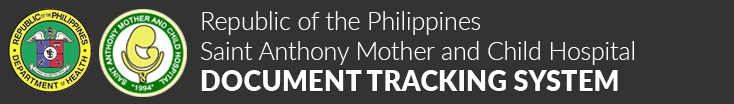
<style>
.page{position:relative;width:734px;height:104px;background:#333333}
.page>*{position:absolute;margin:0}
.t1{font:24.8px "Lato-Light";color:#ffffff}
.t2{font:27.6px "Lato-Black";color:#ffffff}
</style>
<div class="page">
<p class="t1" style="left:201px;top:11px;width:433px;height:54px">Republic of the Philippines<br>Saint Anthony Mother and Child Hospital</p>
<p class="t2" style="left:201px;top:70px;width:417px;height:21px">DOCUMENT TRACKING SYSTEM</p>
</div>
